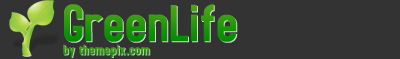
<style>
.page{position:relative;width:400px;height:59px;background:#333333}
.page>*{position:absolute;margin:0}
.t1{font:55px "AccidentalPresidency";font-weight:bold}
.t2{font:14px "AccidentalPresidency";letter-spacing:0.025em;color:#2d9c0c;font-weight:bold}
</style>
<div class="page">
<p class="t1" style="left:64px;top:4px;width:173px;height:38px">GreenLife</p>
<p class="t2" style="left:63px;top:44px;width:87px;height:13px">by themepix.com</p>
</div>
